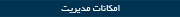
<style>
.page{position:relative;width:180px;height:17px;background:#003351}
.page>*{position:absolute;margin:0}
.t1{font:10px "BYekan";color:#ffffff}
</style>
<div class="page">
<p class="t1" style="left:61px;top:5px;width:59px;height:8px">امکانات مدیریت</p>
</div>
